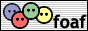
<style>
.page{position:relative;width:88px;height:31px;background:#ffffff}
.page>*{position:absolute;margin:0}
.t1{font:18px "TrebuchetMS-Bold";color:#000000}
</style>
<div class="page">
<p class="t1" style="left:53px;top:14px;width:34px;height:15px">foaf</p>
</div>
